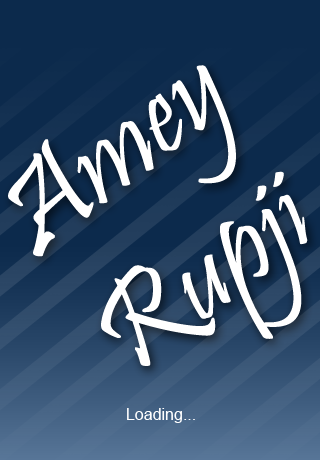
<style>
.page{position:relative;width:320px;height:460px;background:#0c2a4c}
.page>*{position:absolute;margin:0}
.t1{font:128px "Pristina-Regular";color:#ffffff}
.t2{font:16px "ArialMT";color:#ffffff}
</style>
<div class="page">
<p class="t1" style="left:8px;top:65px;width:300px;height:301px;rotate:-38deg">Amey<br>Rupji</p>
<p class="t2" style="left:127px;top:408px;width:68px;height:15px">Loading...</p>
</div>
